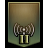
<style>
.page{position:relative;width:48px;height:48px;background:#ffffff}
.page>*{position:absolute;margin:0}
.t1{font:11px "StencilStd"}
</style>
<div class="page">
<p class="t1" style="left:19px;top:35px;width:10px;height:9px">ii</p>
</div>
